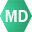
<style>
.page{position:relative;width:32px;height:32px;background:#ffffff}
.page>*{position:absolute;margin:0}
.t1{font:18.3px "FranklinGothic-Medium";color:#ffffff;scale:0.88 1}
</style>
<div class="page">
<p class="t1" style="left:5px;top:10px;width:23px;height:12px">MD</p>
</div>
